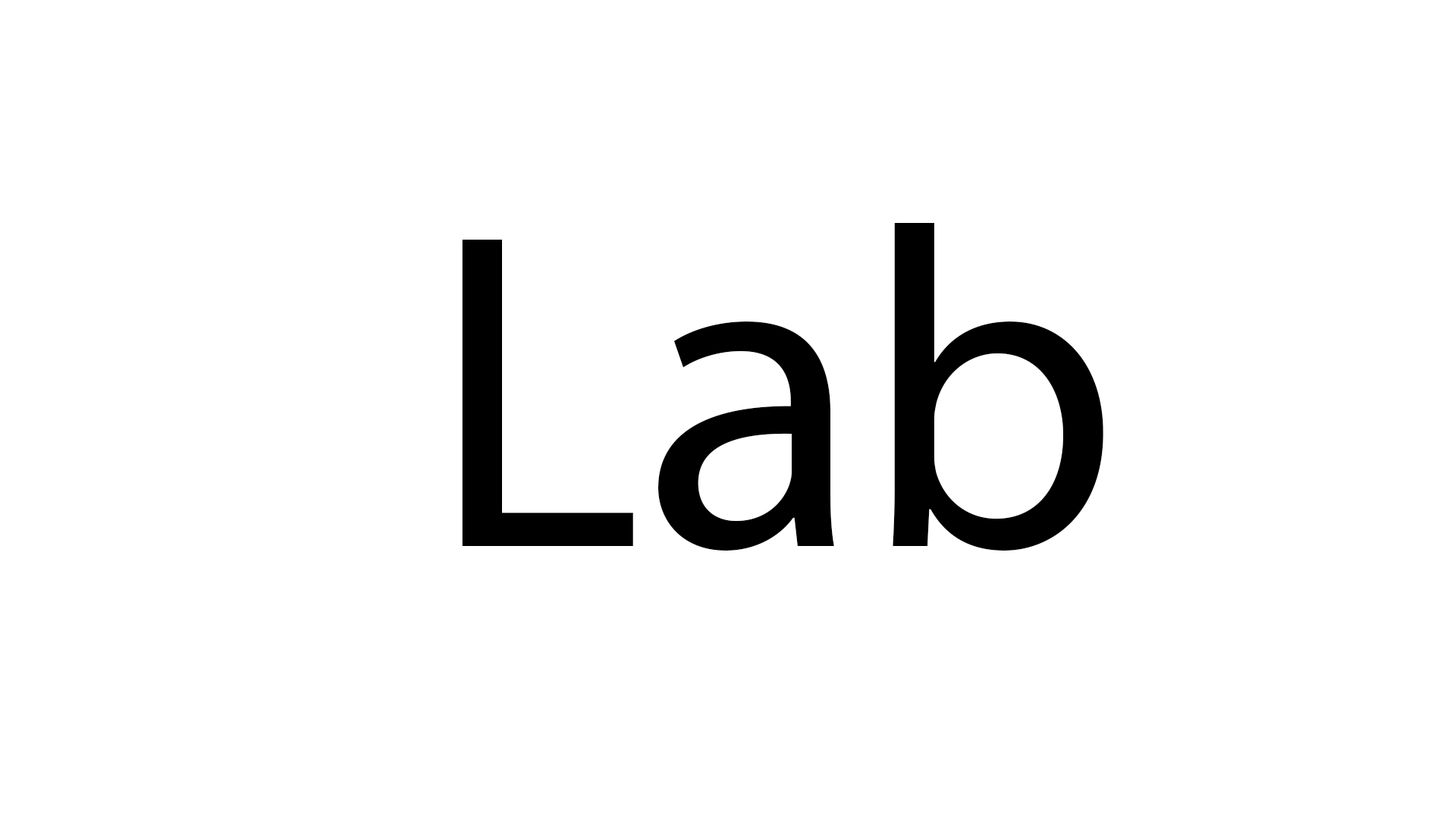
<style>
.page{position:relative;width:1456px;height:819px;background:#ffffff}
.page>*{position:absolute;margin:0}
.t1{font:455px "MyriadPro-Regular";color:#000000}
</style>
<div class="page">
<p class="t1" style="left:462px;top:223px;width:641px;height:328px">Lab</p>
</div>
